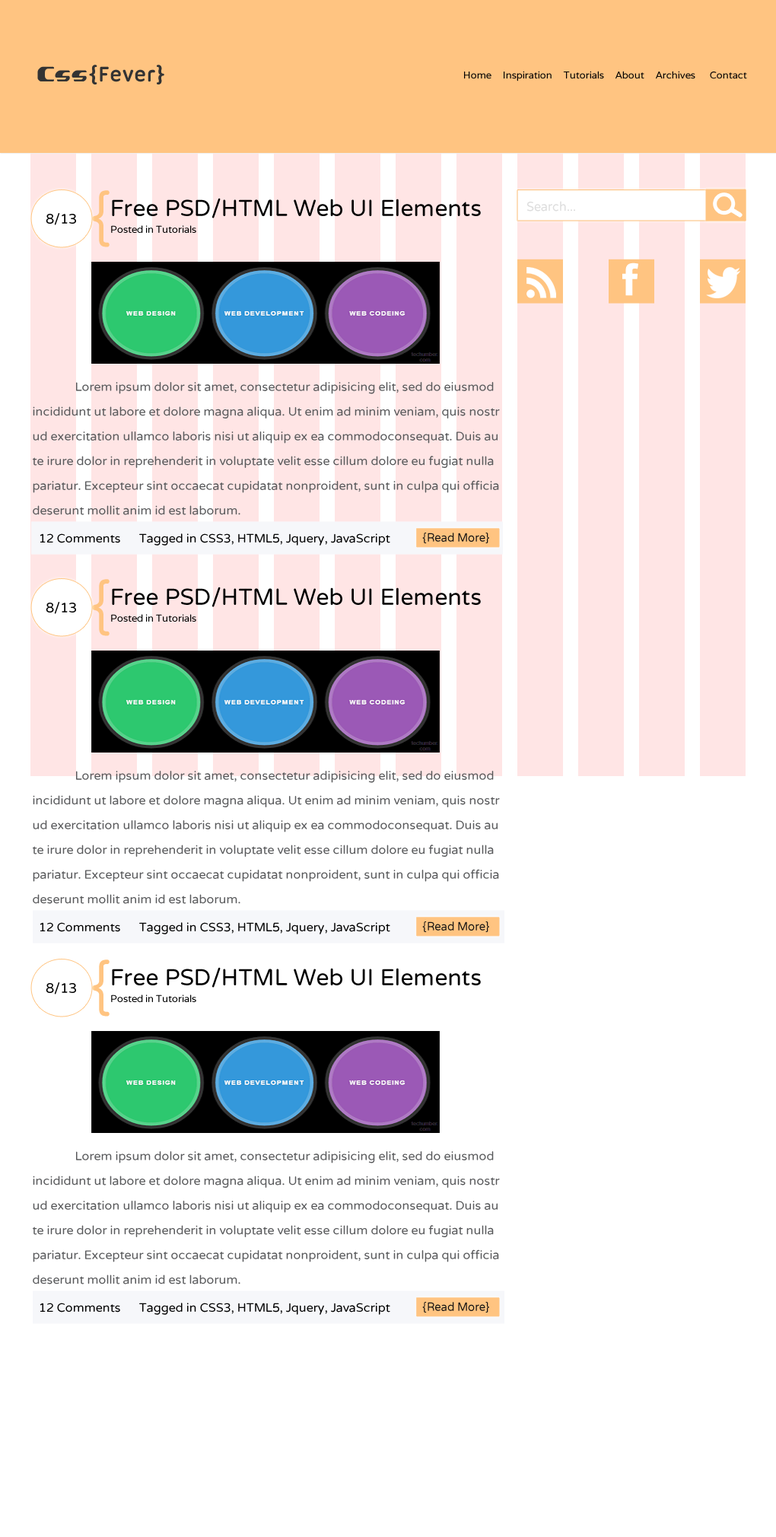
<style>
.page{position:relative;width:776px;height:1537px;background:#ffffff}
.page>*{position:absolute;margin:0}
.t1{font:22.8px "UbuntuTitling-Bold";color:#333333}
.t2{font:18.3px "Curvic";color:#333333}
.t3{font:9.9px "VarelaRound";color:#020202}
.t4{font:62.4px "VarelaRound";color:#ffc481;scale:0.88 1}
.t5{font:22.8px "VarelaRound";color:#000000}
.t6{font:13.1px "VarelaRound";color:#dddddd;scale:0.93 1}
.t7{font:13.7px "VarelaRound";color:#010101}
.t8{font:45.6px "KlavikaBold-Bold";color:#ffffff}
.t9{font:12.2px/24.7px "VarelaRound";color:#58595b}
.t10{font:12.2px "VarelaRound";color:#020202}
.t11{font:11.9px "VarelaRound";color:#121212;scale:0.95 1}
</style>
<div class="page">
<p class="t1" style="left:37px;top:65px;width:127px;height:19px"><span class="t2">Css</span>{Fever}</p>
<p class="t3" style="left:464px;top:71px;width:283px;height:10px">Home     Inspiration     Tutorials     About     Archives      Contact</p>
<p class="t4" style="left:92px;top:190px;width:18px;height:57px">{</p>
<p class="t5" style="left:112px;top:198px;width:369px;height:20px">Free PSD/HTML Web UI Elements</p>
<p class="t6" style="left:527px;top:201px;width:48px;height:10px">Search...</p>
<p class="t7" style="left:46px;top:213px;width:30px;height:12px">8/13</p>
<p class="t3" style="left:111px;top:225px;width:85px;height:8px">Posted in Tutorials</p>
<p class="t8" style="left:622px;top:262px;width:16px;height:34px">f</p>
<p class="t9" style="left:32px;top:382px;width:468px;height:133px">Lorem ipsum dolor sit amet, consectetur adipisicing elit, sed do eiusmod  <br>incididunt ut labore et dolore magna aliqua. Ut enim ad minim veniam, quis nostr<br>ud exercitation ullamco laboris nisi ut aliquip ex ea commodoconsequat. Duis au<br>te irure dolor in reprehenderit in voluptate velit esse cillum dolore eu fugiat nulla <br>pariatur. Excepteur sint occaecat cupidatat nonproident, sunt in culpa qui officia<br>deserunt mollit anim id est laborum.</p>
<p class="t10" style="left:40px;top:533px;width:350px;height:12px">12 Comments      Tagged in CSS3, HTML5, Jquery, JavaScript</p>
<p class="t11" style="left:422px;top:533px;width:67px;height:10px">{Read More}</p>
<p class="t4" style="left:92px;top:579px;width:18px;height:57px">{</p>
<p class="t5" style="left:112px;top:587px;width:369px;height:20px">Free PSD/HTML Web UI Elements</p>
<p class="t7" style="left:46px;top:602px;width:30px;height:12px">8/13</p>
<p class="t3" style="left:111px;top:614px;width:85px;height:8px">Posted in Tutorials</p>
<p class="t9" style="left:32px;top:771px;width:468px;height:133px">Lorem ipsum dolor sit amet, consectetur adipisicing elit, sed do eiusmod  <br>incididunt ut labore et dolore magna aliqua. Ut enim ad minim veniam, quis nostr<br>ud exercitation ullamco laboris nisi ut aliquip ex ea commodoconsequat. Duis au<br>te irure dolor in reprehenderit in voluptate velit esse cillum dolore eu fugiat nulla <br>pariatur. Excepteur sint occaecat cupidatat nonproident, sunt in culpa qui officia<br>deserunt mollit anim id est laborum.</p>
<p class="t10" style="left:40px;top:922px;width:350px;height:12px">12 Comments      Tagged in CSS3, HTML5, Jquery, JavaScript</p>
<p class="t11" style="left:422px;top:921px;width:67px;height:11px">{Read More}</p>
<p class="t4" style="left:92px;top:959px;width:18px;height:57px">{</p>
<p class="t5" style="left:112px;top:967px;width:369px;height:20px">Free PSD/HTML Web UI Elements</p>
<p class="t7" style="left:46px;top:982px;width:30px;height:12px">8/13</p>
<p class="t3" style="left:111px;top:994px;width:85px;height:8px">Posted in Tutorials</p>
<p class="t9" style="left:32px;top:1151px;width:468px;height:133px">Lorem ipsum dolor sit amet, consectetur adipisicing elit, sed do eiusmod  <br>incididunt ut labore et dolore magna aliqua. Ut enim ad minim veniam, quis nostr<br>ud exercitation ullamco laboris nisi ut aliquip ex ea commodoconsequat. Duis au<br>te irure dolor in reprehenderit in voluptate velit esse cillum dolore eu fugiat nulla <br>pariatur. Excepteur sint occaecat cupidatat nonproident, sunt in culpa qui officia<br>deserunt mollit anim id est laborum.</p>
<p class="t11" style="left:422px;top:1302px;width:67px;height:10px">{Read More}</p>
<p class="t10" style="left:40px;top:1302px;width:350px;height:13px">12 Comments      Tagged in CSS3, HTML5, Jquery, JavaScript</p>
</div>
